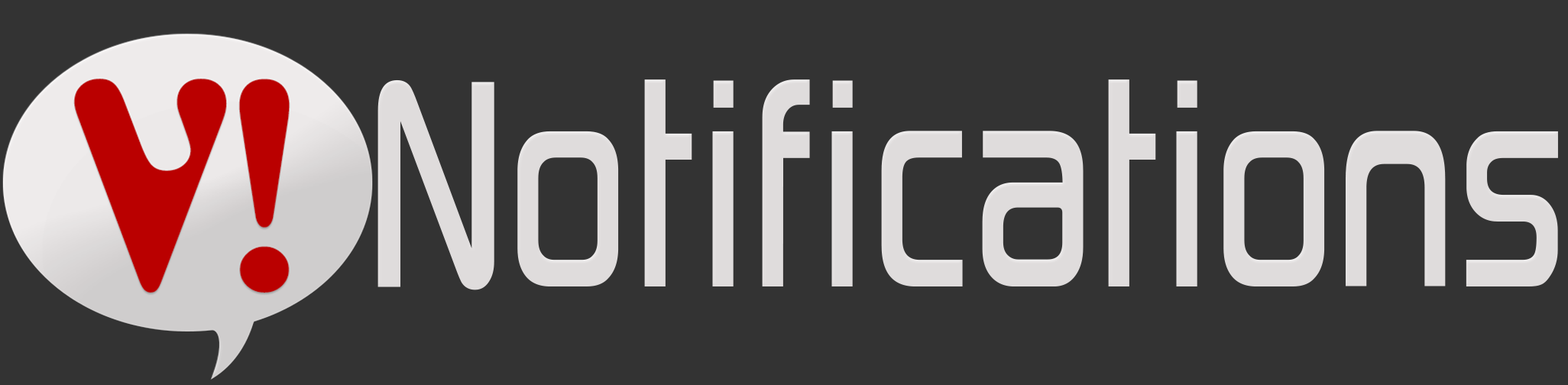
<style>
.page{position:relative;width:1568px;height:385px;background:#333333}
.page>*{position:absolute;margin:0}
.t1{font:422.6px "SonySketchEF";color:#dfdcdc;scale:0.57 1}
</style>
<div class="page">
<p class="t1" style="left:377px;top:79px;width:1181px;height:211px">Notifications</p>
</div>
